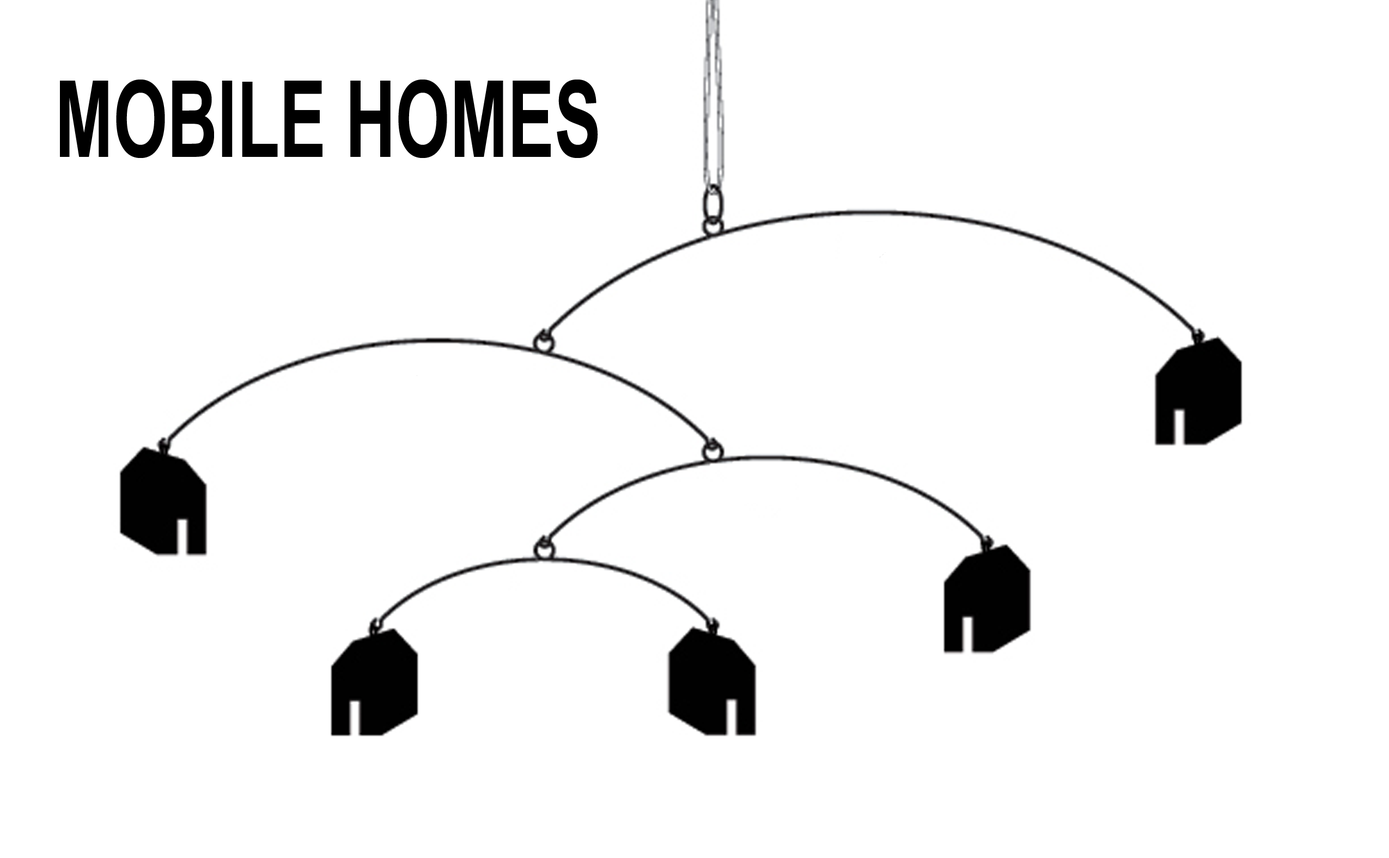
<style>
.page{position:relative;width:1389px;height:858px;background:#ffffff}
.page>*{position:absolute;margin:0}
.t1{font:106.3px "ArialNarrow-Bold";color:#000000;scale:0.8 1}
</style>
<div class="page">
<p class="t1" style="left:60px;top:80px;width:538px;height:78px">MOBILE HOMES</p>
</div>
